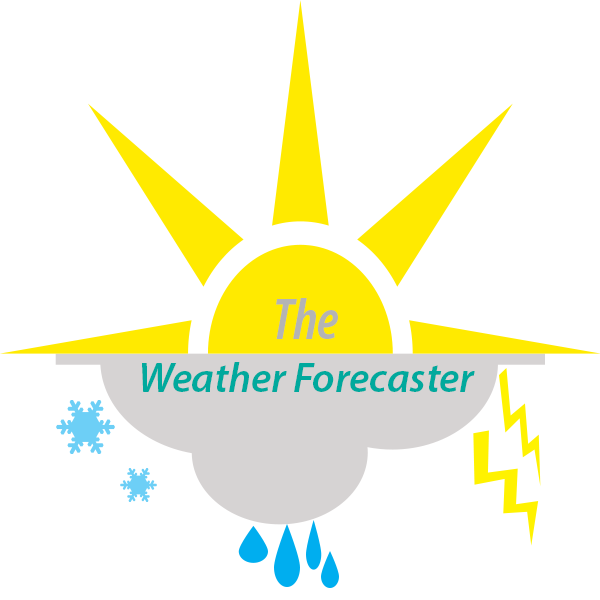
<style>
.page{position:relative;width:600px;height:600px;background:#ffffff}
.page>*{position:absolute;margin:0}
.t1{font:58.3px "MyriadPro-SemiboldCondIt";color:#b4b4b4}
.t2{font:41.7px "MyriadPro-SemiboldIt";color:#00a99d}
</style>
<div class="page">
<p class="t1" style="left:276px;top:298px;width:62px;height:41px">The</p>
<p class="t2" style="left:142px;top:362px;width:333px;height:30px">Weather Forecaster</p>
</div>
